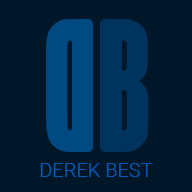
<style>
.page{position:relative;width:192px;height:192px;background:#001629}
.page>*{position:absolute;margin:0}
.t1{font:20px "Roboto-Light";color:#005ab5}
</style>
<div class="page">
<p class="t1" style="left:40px;top:163px;width:113px;height:14px">DEREK BEST</p>
</div>
